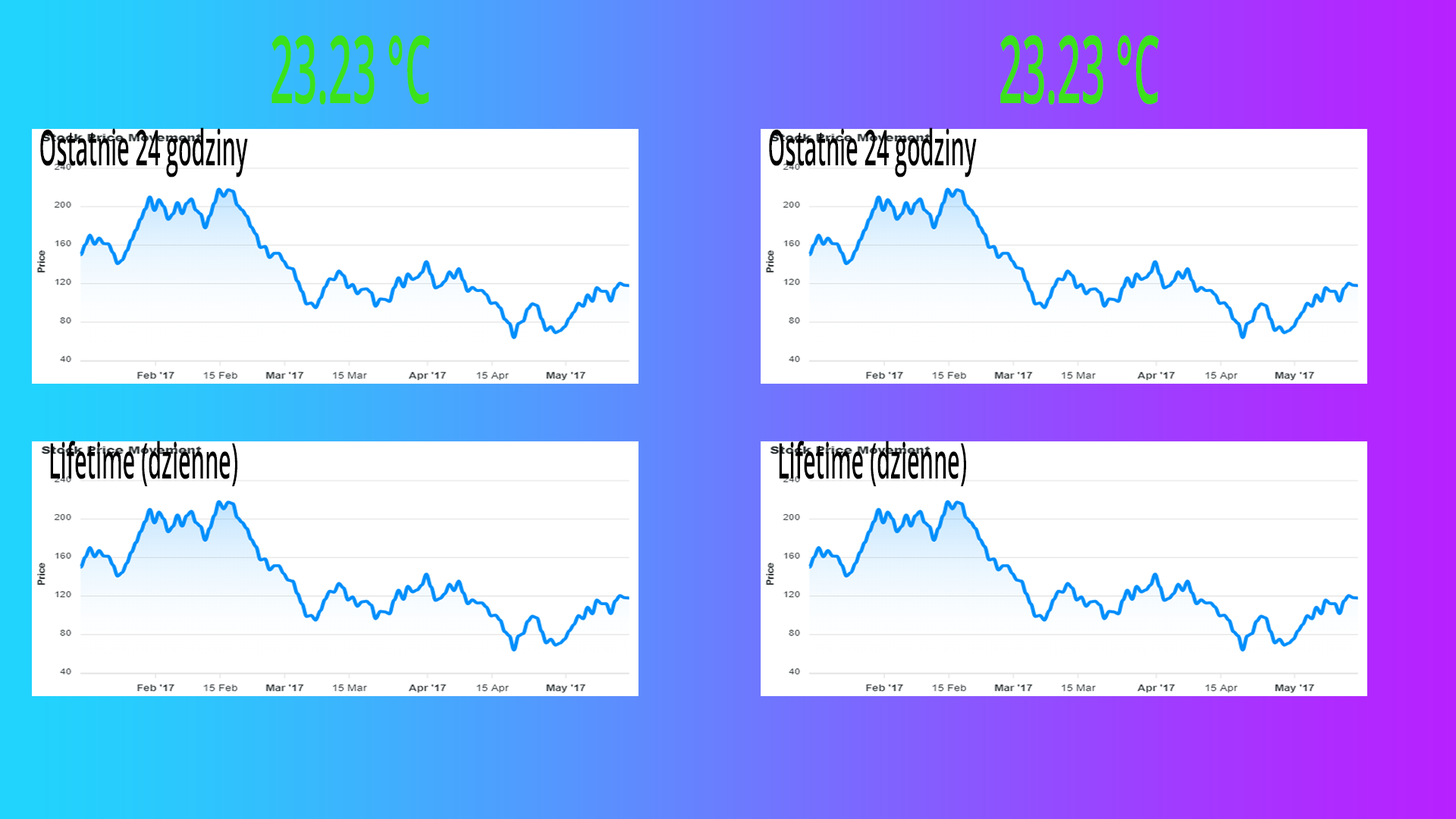
<style>
.page{position:relative;width:1456px;height:819px;background:#ffffff}
.page>*{position:absolute;margin:0}
.t1{font:93.6px "OpenSans-Semibold";color:#3be11a;scale:0.44 1}
.t2{font:49.3px "OpenSans-Semibold";color:#000000;scale:0.44 1}
</style>
<div class="page">
<p class="t1" style="left:271px;top:35px;width:159px;height:70px">23.23 °C</p>
<p class="t1" style="left:1000px;top:35px;width:159px;height:70px">23.23 °C</p>
<p class="t2" style="left:40px;top:127px;width:208px;height:50px">Ostatnie 24 godziny</p>
<p class="t2" style="left:769px;top:127px;width:208px;height:50px">Ostatnie 24 godziny</p>
<p class="t2" style="left:50px;top:441px;width:187px;height:46px">Lifetime (dzienne)</p>
<p class="t2" style="left:779px;top:441px;width:187px;height:46px">Lifetime (dzienne)</p>
</div>
